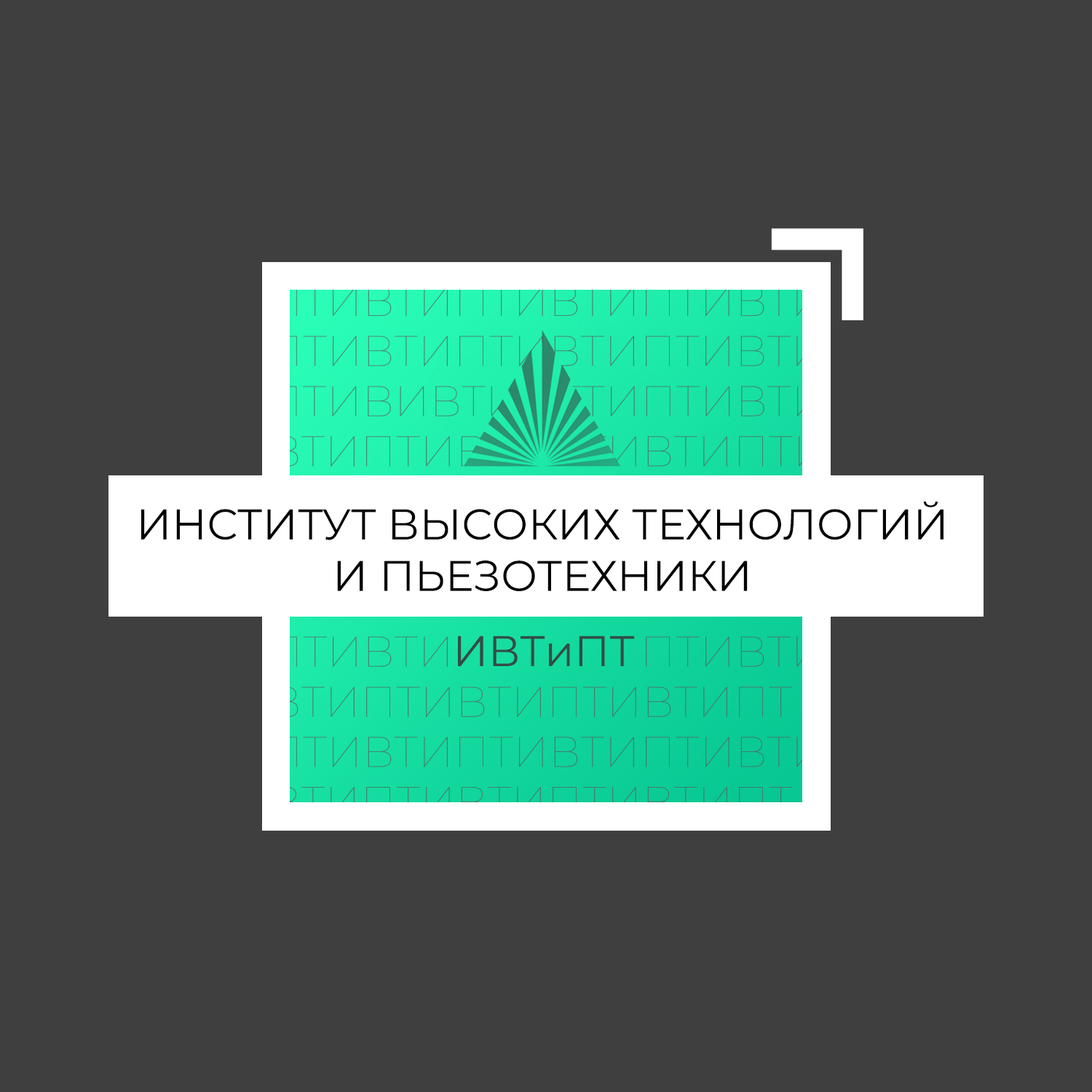
<style>
.page{position:relative;width:1092px;height:1092px;background:#3f3f3f}
.page>*{position:absolute;margin:0}
.t1{font:43px "Montserrat-Regular";color:#000000;text-transform:uppercase}
.t2{font:43px/50.1px "Montserrat-Regular";color:#000000;text-transform:uppercase}
.t3{font:43px "Montserrat-Regular";color:#324d45}
</style>
<div class="page">
<p class="t1" style="left:141px;top:502px;width:802px;height:89px;text-align:center"><span class="t2">Инс</span>титут высоких технологий<br>и пьезотехники</p>
<p class="t3" style="left:458px;top:636px;width:177px;height:30px">ИВТиПТ</p>
</div>
